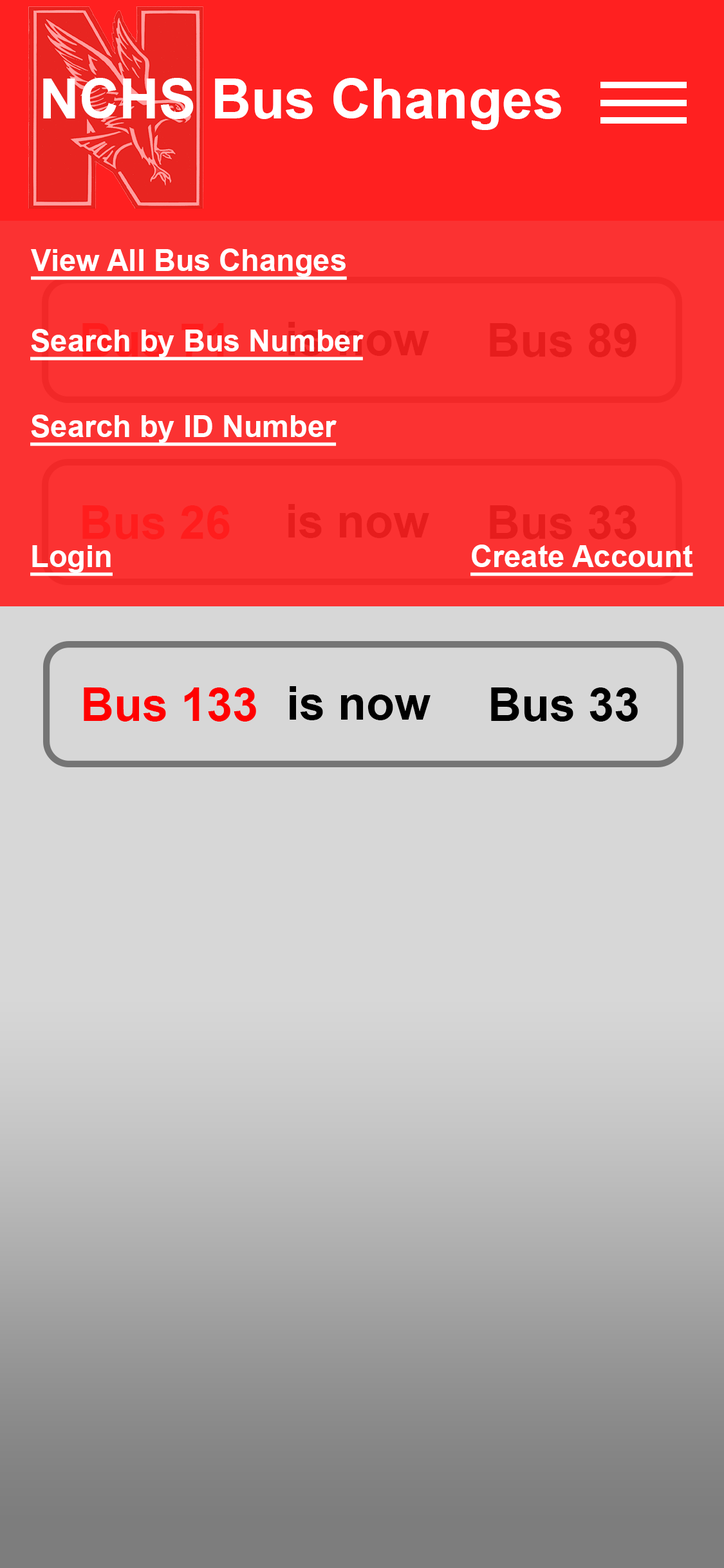
<style>
.page{position:relative;width:724px;height:1568px;background:#d7d7d7}
.page>*{position:absolute;margin:0}
.t1{font:55.2px "Arial-BoldMT";color:#ffffff}
.t2{font:30.2px "Arial-BoldMT";color:#ffffff;text-decoration:underline}
.t3{font:46.3px "Arial-BoldMT";color:#e61d1d}
.t4{font:46.3px "Arial-BoldMT";color:#ff1d1d}
.t5{font:46.3px "Arial-BoldMT";color:#ff0000}
.t6{font:46.3px "Arial-BoldMT";color:#000000}
</style>
<div class="page">
<p class="t1" style="left:43px;top:78px;width:518px;height:52px">NCHS Bus Changes</p>
<p class="t2" style="left:31px;top:248px;width:316px;height:32px">View All Bus Changes</p>
<p class="t2" style="left:30px;top:329px;width:334px;height:31px">Search by Bus Number</p>
<p class="t3" style="left:288px;top:322px;width:141px;height:34px">is now</p>
<p class="t3" style="left:490px;top:323px;width:147px;height:34px">Bus 89</p>
<p class="t2" style="left:30px;top:415px;width:307px;height:31px">Search by ID Number</p>
<p class="t4" style="left:82px;top:505px;width:148px;height:34px">Bus 26</p>
<p class="t3" style="left:288px;top:504px;width:141px;height:34px">is now</p>
<p class="t3" style="left:490px;top:505px;width:147px;height:34px">Bus 33</p>
<p class="t2" style="left:30px;top:545px;width:83px;height:31px">Login</p>
<p class="t2" style="left:471px;top:545px;width:222px;height:31px">Create Account</p>
<p class="t5" style="left:84px;top:687px;width:172px;height:35px">Bus 133</p>
<p class="t6" style="left:290px;top:686px;width:141px;height:34px">is now</p>
<p class="t6" style="left:491px;top:687px;width:147px;height:35px">Bus 33</p>
</div>
